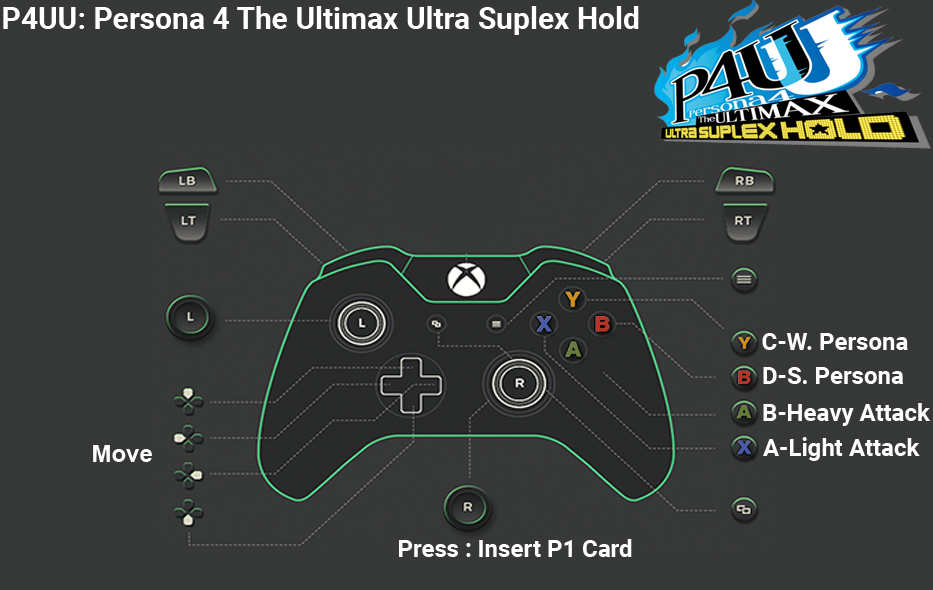
<style>
.page{position:relative;width:933px;height:590px;background:#363838}
.page>*{position:absolute;margin:0}
.t1{font:30px "Roboto-Bold";color:#ffffff}
.t2{font:24px "Roboto-Bold";color:#ffffff}
.t3{font:24px "Arial-BoldMT";color:#fefefe}
</style>
<div class="page">
<p class="t1" style="left:3px;top:6px;width:636px;height:29px">P4UU: Persona 4 The Ultimax Ultra Suplex Hold</p>
<p class="t2" style="left:762px;top:333px;width:146px;height:17px">C-W. Persona</p>
<p class="t2" style="left:763px;top:367px;width:141px;height:17px">D-S. Persona</p>
<p class="t2" style="left:763px;top:403px;width:168px;height:23px">B-Heavy Attack</p>
<p class="t2" style="left:763px;top:437px;width:157px;height:24px">A-Light Attack</p>
<p class="t3" style="left:93px;top:445px;width:59px;height:17px">Move</p>
<p class="t2" style="left:399px;top:539px;width:233px;height:18px">Press : Insert P1 Card</p>
</div>
